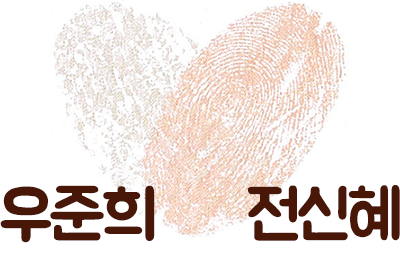
<style>
.page{position:relative;width:400px;height:260px;background:#ffffff}
.page>*{position:absolute;margin:0}
.t1{font:68.3px "BMJUAOTF";letter-spacing:-0.05em;color:#491708}
</style>
<div class="page">
<p class="t1" style="left:0px;top:185px;width:155px;height:58px">우준희</p>
<p class="t1" style="left:247px;top:185px;width:153px;height:56px">전신혜</p>
</div>
